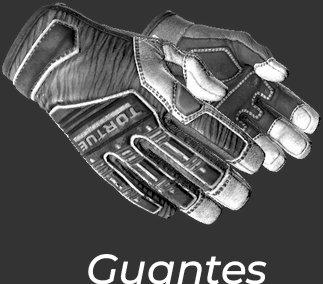
<style>
.page{position:relative;width:323px;height:284px;background:#333333}
.page>*{position:absolute;margin:0}
.t1{font:42px "MontserratItalic-MediumItalic";color:#ffffff}
</style>
<div class="page">
<p class="t1" style="left:88px;top:254px;width:179px;height:31px">Guantes</p>
</div>
